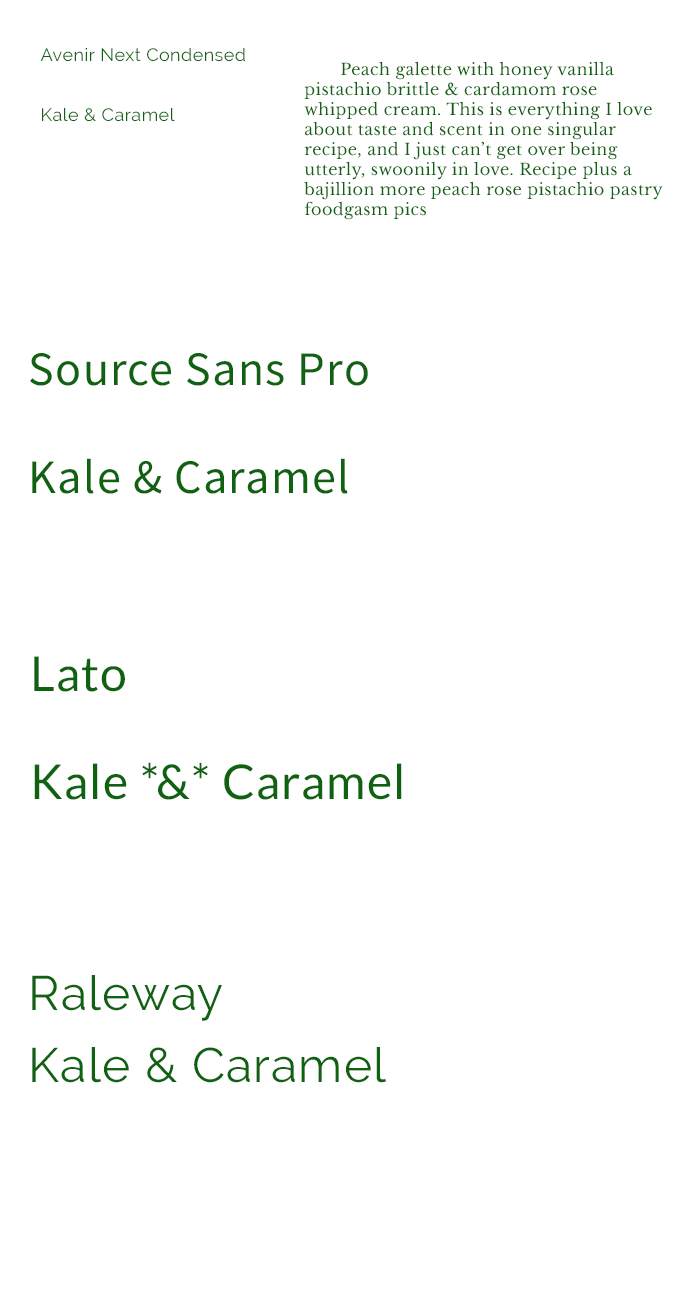
<style>
.page{position:relative;width:700px;height:1300px;background:#ffffff}
.page>*{position:absolute;margin:0}
.t1{font:18px/30px "Raleway";letter-spacing:0.025em;color:#0e6210}
.t2{font:16px/20px "LibreBaskerville-Regular";letter-spacing:0.025em;color:#0e6210}
.t3{font:48px/36px "SourceSansPro-Regular";letter-spacing:0.025em;color:#0e6210}
.t4{font:48px/36px "Lato-Regular";letter-spacing:0.025em;color:#0e6210}
.t5{font:48px/36px "Raleway";letter-spacing:0.025em;color:#0e6210}
</style>
<div class="page">
<p class="t1" style="left:40px;top:48px;width:205px;height:74px">Avenir Next Condensed<br><br>Kale &amp; Caramel</p>
<p class="t2" style="left:304px;top:61px;width:359px;height:159px">Peach galette with honey vanilla pistachio brittle &amp; cardamom rose whipped cream. This is everything I love about taste and scent in one singular recipe, and I just can’t get over being utterly, swoonily in love. Recipe plus a bajillion more peach rose pistachio pastry foodgasm pics</p>
<p class="t3" style="left:30px;top:353px;width:338px;height:141px">Source Sans Pro<br><br><br>Kale &amp; Caramel</p>
<p class="t4" style="left:34px;top:656px;width:368px;height:144px">Lato<br><br><br>Kale *&amp;* Caramel</p>
<p class="t5" style="left:32px;top:975px;width:354px;height:108px">Raleway<br><br>Kale &amp; Caramel</p>
</div>
